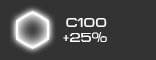
<style>
.page{position:relative;width:156px;height:60px;background:#333333}
.page>*{position:absolute;margin:0}
.t1{font:13px "MetroDF";color:#ffffff}
</style>
<div class="page">
<p class="t1" style="left:66px;top:18px;width:41px;height:9px">c100</p>
<p class="t1" style="left:63px;top:32px;width:44px;height:10px">+25%</p>
</div>
